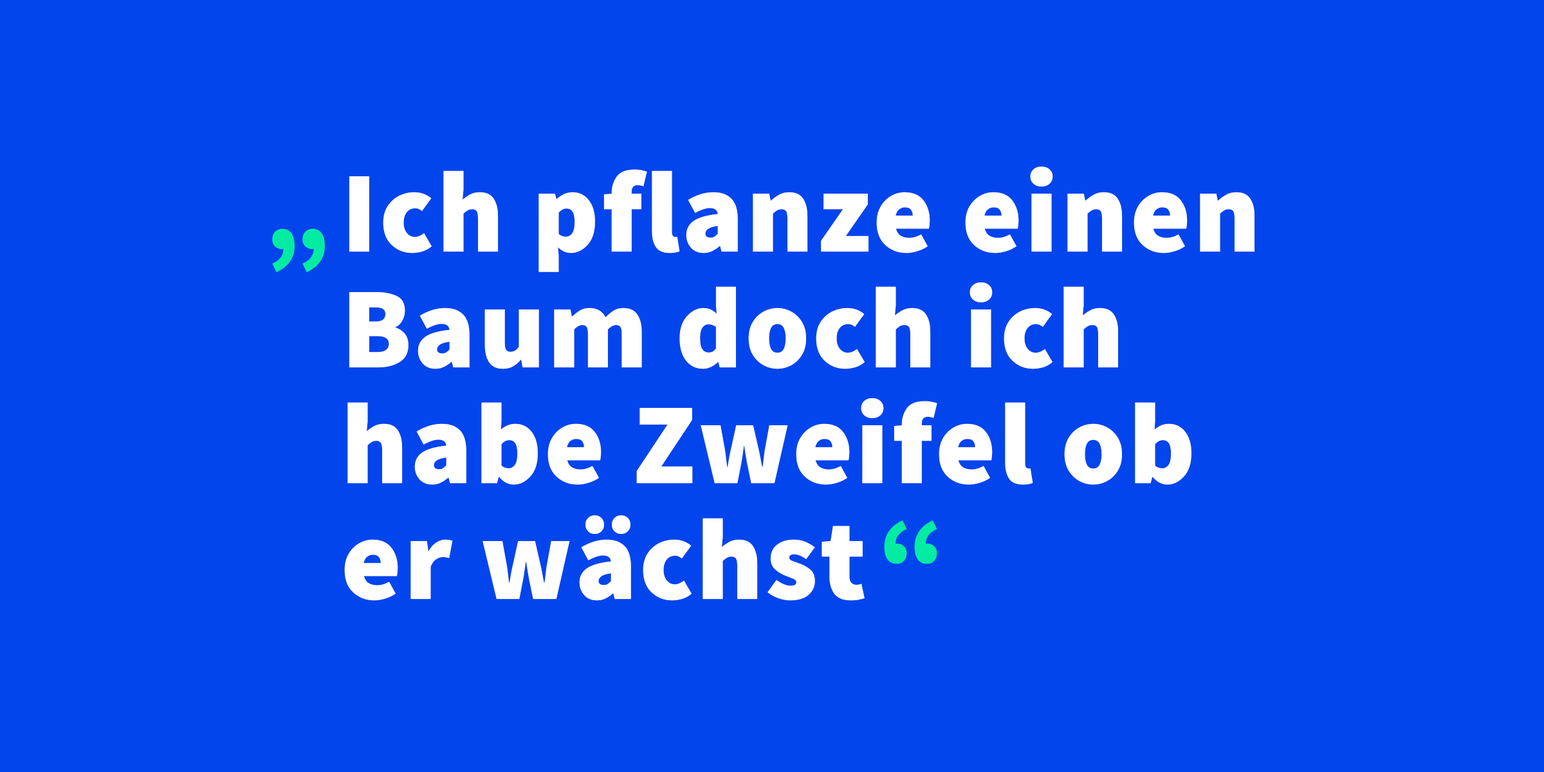
<style>
.page{position:relative;width:1544px;height:772px;background:#0345ec}
.page>*{position:absolute;margin:0}
.t1{font:115.8px/115.8px "Mada-Black";letter-spacing:0.02em;color:#ffffff}
.t2{font:115.8px/115.8px "Mada-Black";letter-spacing:0.02em;color:#03eca2}
.t3{font:115.8px "Mada-Black";letter-spacing:0.02em;color:#03eca2}
</style>
<div class="page">
<p class="t1" style="left:344px;top:166px;width:911px;height:435px">Ich pflanze einen <br>Baum doch ich <br>habe Zweifel ob <br>er wächst<span class="t2">“</span></p>
<p class="t3" style="left:272px;top:228px;width:53px;height:45px">„</p>
</div>
